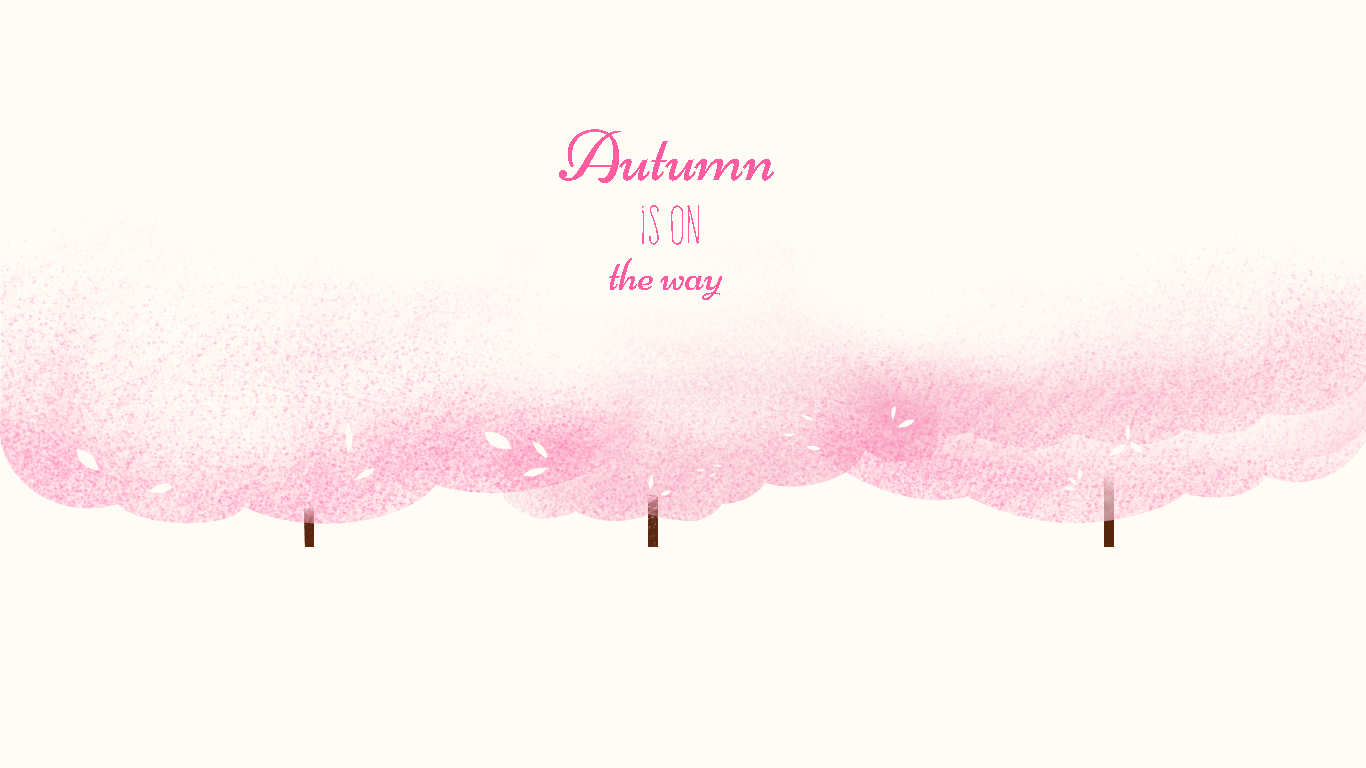
<style>
.page{position:relative;width:1366px;height:768px;background:#fffcf6}
.page>*{position:absolute;margin:0}
.t1{font:72px "Niconne-Regular";letter-spacing:-0.015em;color:#ff5c9f}
.t2{font:48px "FrenteH1-Regular";letter-spacing:-0.015em;color:#ff5c9f}
.t3{font:48px "Niconne-Regular";letter-spacing:-0.015em;color:#ff5c9f}
</style>
<div class="page">
<p class="t1" style="left:559px;top:129px;width:215px;height:54px">Autumn</p>
<p class="t2" style="left:642px;top:205px;width:57px;height:40px">is on</p>
<p class="t3" style="left:609px;top:258px;width:113px;height:42px">the way</p>
</div>
